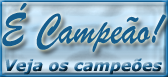
<style>
.page{position:relative;width:168px;height:77px}
.page>*{position:absolute;margin:0}
.t1{font:45.1px "BrushScriptMT";color:#155d8d;scale:0.85 1}
.t2{font:15.7px "Verdana-BoldItalic"}
</style>
<div class="page">
<p class="t1" style="left:2px;top:3px;width:165px;height:49px">É Campeão!</p>
<p class="t2" style="left:5px;top:58px;width:157px;height:17px">Veja os campeões</p>
</div>
